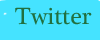
<style>
.page{position:relative;width:100px;height:40px;background:#45e3ff}
.page>*{position:absolute;margin:0}
.t1{font:24px "PlantagenetCherokee";color:#217040}
</style>
<div class="page">
<p class="t1" style="left:15px;top:7px;width:77px;height:18px">Twitter</p>
</div>
